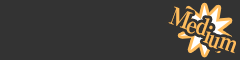
<style>
.page{position:relative;width:240px;height:60px;background:#333333}
.page>*{position:absolute;margin:0}
.t1{font:24px "RyuminPro-ExBold";letter-spacing:-0.08em;color:#ffbc5c;scale:0.9 1}
</style>
<div class="page">
<p class="t1" style="left:168px;top:6px;width:68px;height:48px;rotate:20deg">Medium</p>
</div>
